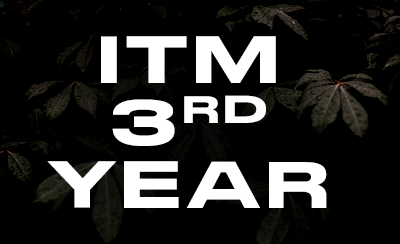
<style>
.page{position:relative;width:400px;height:244px;background:#000000}
.page>*{position:absolute;margin:0}
.t1{font:66.7px/62.5px "StretchProRegular";letter-spacing:0.075em;color:#ffffff}
</style>
<div class="page">
<p class="t1" style="left:47px;top:36px;width:280px;height:172px;text-align:center">ITM<br>3RD<br>YEAR</p>
</div>
